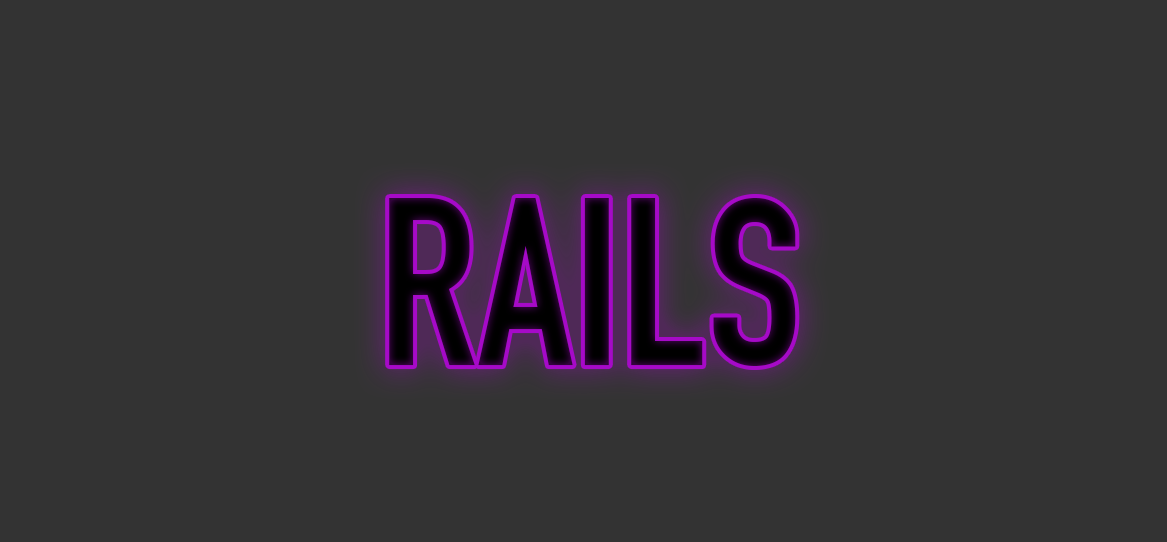
<style>
.page{position:relative;width:1167px;height:542px;background:#333333}
.page>*{position:absolute;margin:0}
.t1{font:233.7px "DINEngschrift";color:#070009}
</style>
<div class="page">
<p class="t1" style="left:389px;top:198px;width:407px;height:168px">RAILS</p>
</div>
